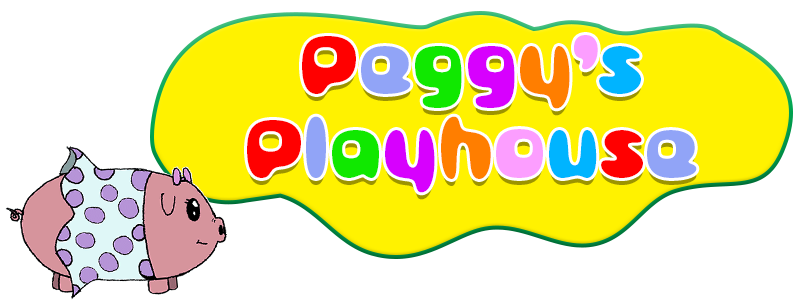
<style>
.page{position:relative;width:800px;height:300px;background:#ffffff}
.page>*{position:absolute;margin:0}
.t1{font:99.7px/83.9px "BubblegumPop-Vanilla";color:#ff0000}
.t2{font:99.7px/83.9px "BubblegumPop-Vanilla";color:#91a4f7}
.t3{font:99.7px/83.9px "BubblegumPop-Vanilla";color:#10e800}
.t4{font:99.7px/83.9px "BubblegumPop-Vanilla";color:#d700fe}
.t5{font:99.7px/83.9px "BubblegumPop-Vanilla";color:#ff7e00}
.t6{font:99.7px/83.9px "BubblegumPop-Vanilla";color:#fc9eff}
.t7{font:99.7px/83.9px "BubblegumPop-Vanilla";color:#00b4ff}
</style>
<div class="page">
<p class="t1" style="left:247px;top:35px;width:450px;height:158px;text-align:center">P<span class="t2">e</span><span class="t3">g</span><span class="t4">g</span><span class="t5">y</span><span class="t6">’</span><span class="t7">s<br></span>P<span class="t2">l</span><span class="t3">a</span><span class="t4">y</span><span class="t5">h</span><span class="t6">o</span><span class="t7">u</span>s<span class="t2">e</span></p>
</div>
